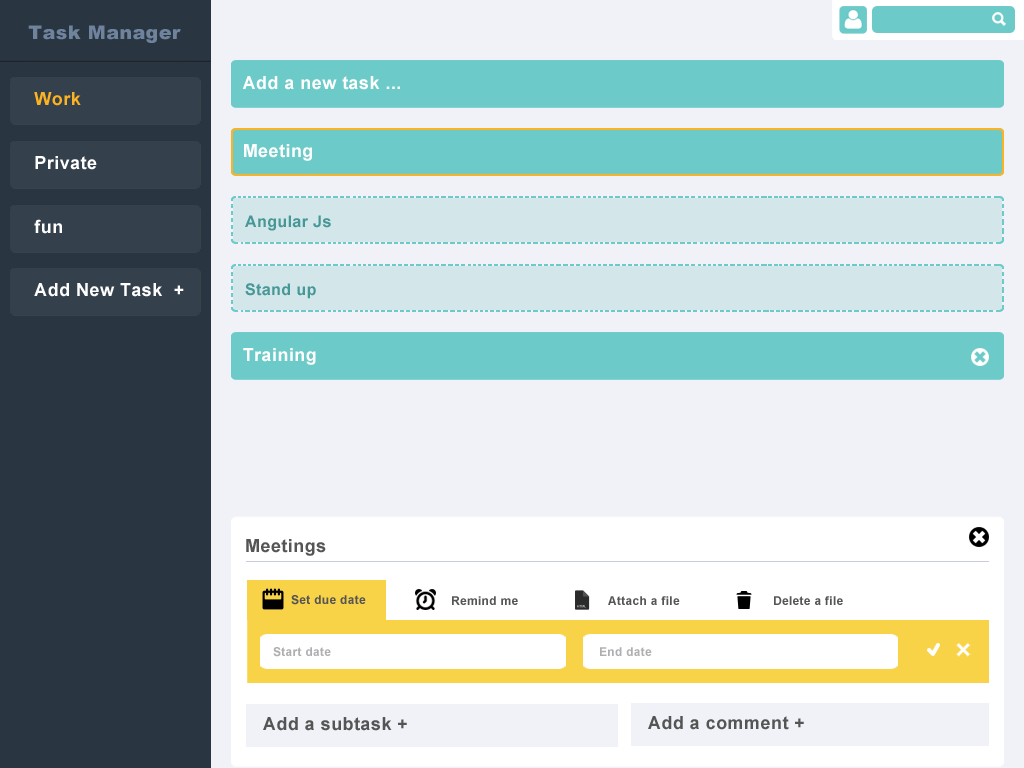
<style>
.page{position:relative;width:1024px;height:768px;background:#f1f2f7}
.page>*{position:absolute;margin:0}
.t1{font:19px "Arial-Black";letter-spacing:0.025em;color:#6f839c}
.t2{font:18px "Arial-BoldMT";letter-spacing:0.025em;color:#ffffff}
.t3{font:18px "Arial-BoldMT";letter-spacing:0.025em;color:#fcb322}
.t4{font:16px "Arial-BoldMT";letter-spacing:0.025em;color:#469796}
.t5{font:18px "Arial-BoldMT";letter-spacing:0.025em;color:#555555}
.t6{font:12px "Arial-BoldMT";letter-spacing:0.025em;color:#555555}
.t7{font:12px "Arial-BoldMT";letter-spacing:0.025em;color:#aeafb1}
</style>
<div class="page">
<p class="t1" style="left:28px;top:25px;width:153px;height:18px">Task Manager</p>
<p class="t2" style="left:242px;top:76px;width:158px;height:14px">Add a new task ...</p>
<p class="t3" style="left:34px;top:92px;width:47px;height:14px">Work</p>
<p class="t2" style="left:244px;top:144px;width:68px;height:17px">Meeting</p>
<p class="t2" style="left:35px;top:156px;width:62px;height:14px">Private</p>
<p class="t2" style="left:34px;top:219px;width:28px;height:15px">fun</p>
<p class="t4" style="left:245px;top:215px;width:86px;height:16px">Angular Js</p>
<p class="t2" style="left:34px;top:283px;width:150px;height:14px">Add New Task  +</p>
<p class="t4" style="left:245px;top:283px;width:71px;height:16px">Stand up</p>
<p class="t2" style="left:243px;top:348px;width:73px;height:17px">Training</p>
<p class="t5" style="left:246px;top:539px;width:80px;height:17px">Meetings</p>
<p class="t6" style="left:291px;top:595px;width:75px;height:10px">Set due date</p>
<p class="t6" style="left:452px;top:596px;width:66px;height:9px">Remind me</p>
<p class="t6" style="left:608px;top:596px;width:72px;height:9px">Attach a file</p>
<p class="t6" style="left:774px;top:596px;width:69px;height:9px">Delete a file</p>
<p class="t7" style="left:273px;top:647px;width:58px;height:10px">Start date</p>
<p class="t7" style="left:600px;top:647px;width:52px;height:9px">End date</p>
<p class="t5" style="left:263px;top:717px;width:144px;height:14px">Add a subtask +</p>
<p class="t5" style="left:648px;top:716px;width:156px;height:14px">Add a comment +</p>
</div>
